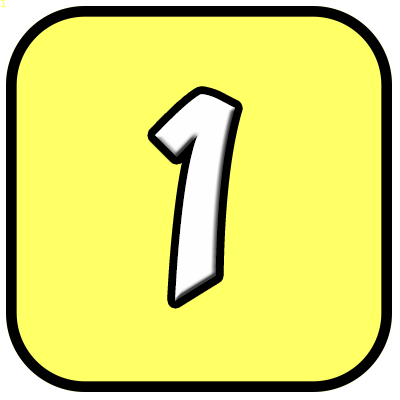
<style>
.page{position:relative;width:400px;height:400px;background:#ffff66}
.page>*{position:absolute;margin:0}
.t1{font:10.7px "LucidaConsole";color:#ffff66}
.t2{font:240px "Yikes";color:#fefefe}
</style>
<div class="page">
<p class="t1" style="left:0px;top:0px;width:7px;height:8px">1</p>
<p class="t2" style="left:155px;top:94px;width:80px;height:207px">1</p>
</div>
